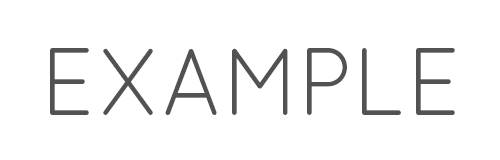
<style>
.page{position:relative;width:500px;height:160px;background:#ffffff}
.page>*{position:absolute;margin:0}
.t1{font:95px "QuicksandBook-Regular";color:#525252;text-transform:uppercase}
</style>
<div class="page">
<p class="t1" style="left:50px;top:48px;width:405px;height:67px">Example</p>
</div>
